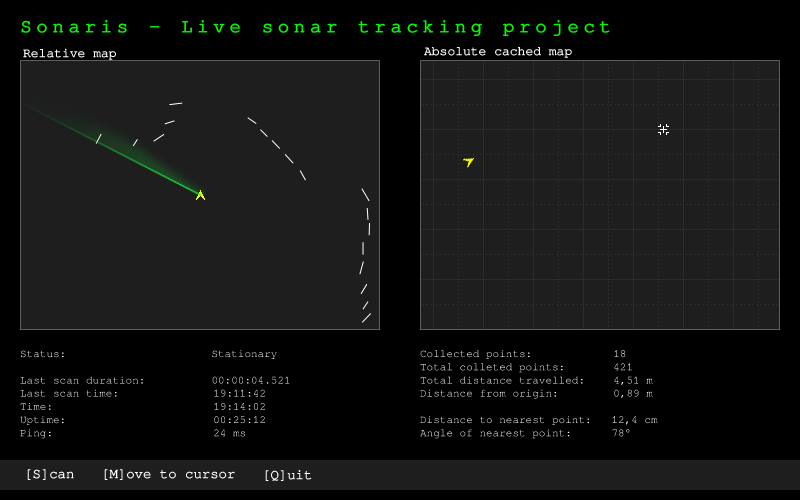
<style>
.page{position:relative;width:800px;height:500px;background:#1e1e1e}
.page>*{position:absolute;margin:0}
.t1{font:19px "FreeMono";letter-spacing:0.22em;color:#00ff00;font-weight:bold}
.t2{font:13px "FreeMono";color:#ffffff}
.t3{font:11px "FreeMono";color:#ffffff}
.t4{font:14px "FreeMono";color:#ffffff}
</style>
<div class="page">
<p class="t1" style="left:21px;top:20px;width:589px;height:16px">Sonaris - Live sonar tracking project</p>
<p class="t2" style="left:23px;top:48px;width:93px;height:12px">Relative map</p>
<p class="t2" style="left:424px;top:47px;width:148px;height:11px">Absolute cached map</p>
<p class="t3" style="left:20px;top:350px;width:270px;height:89px">Status:                      Stationary<br><br>Last scan duration:          00:00:04.521<br>Last scan time:     19:11:42<br>Time:         19:14:02<br>Uptime:      00:25:12<br>Ping:       24 ms</p>
<p class="t3" style="left:420px;top:350px;width:238px;height:89px">Collected points:    18<br>Total colleted points:   421<br>Total distance travelled:   4,51 m<br>Distance from origin:    0,89 m<br><br>Distance to nearest point:   12,4 cm<br>Angle of nearest point:      78°</p>
<p class="t4" style="left:27px;top:469px;width:47px;height:11px">[S]can</p>
<p class="t4" style="left:104px;top:469px;width:131px;height:11px">[M]ove to cursor</p>
<p class="t4" style="left:265px;top:470px;width:47px;height:11px">[Q]uit</p>
</div>
